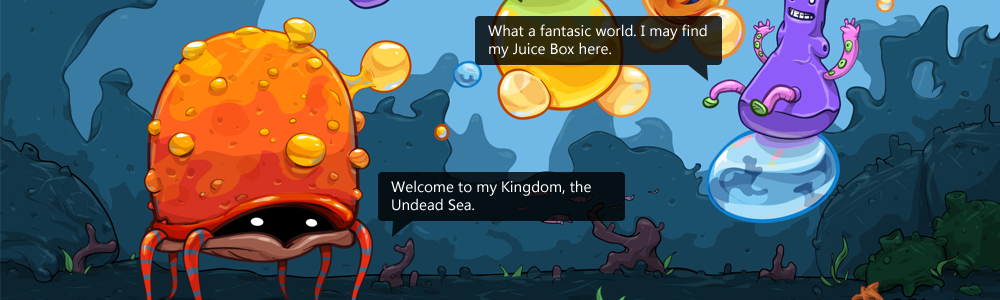
<style>
.page{position:relative;width:1000px;height:300px}
.page>*{position:absolute;margin:0}
.t1{font:14px/18px "MicrosoftYaHei";color:#ffffff}
</style>
<div class="page">
<p class="t1" style="left:488px;top:24px;width:219px;height:34px">What a fantasic world. I may find<br>my Juice Box here.</p>
<p class="t1" style="left:391px;top:180px;width:200px;height:31px">Welcome to my Kingdom, the <br>Undead Sea.</p>
</div>
